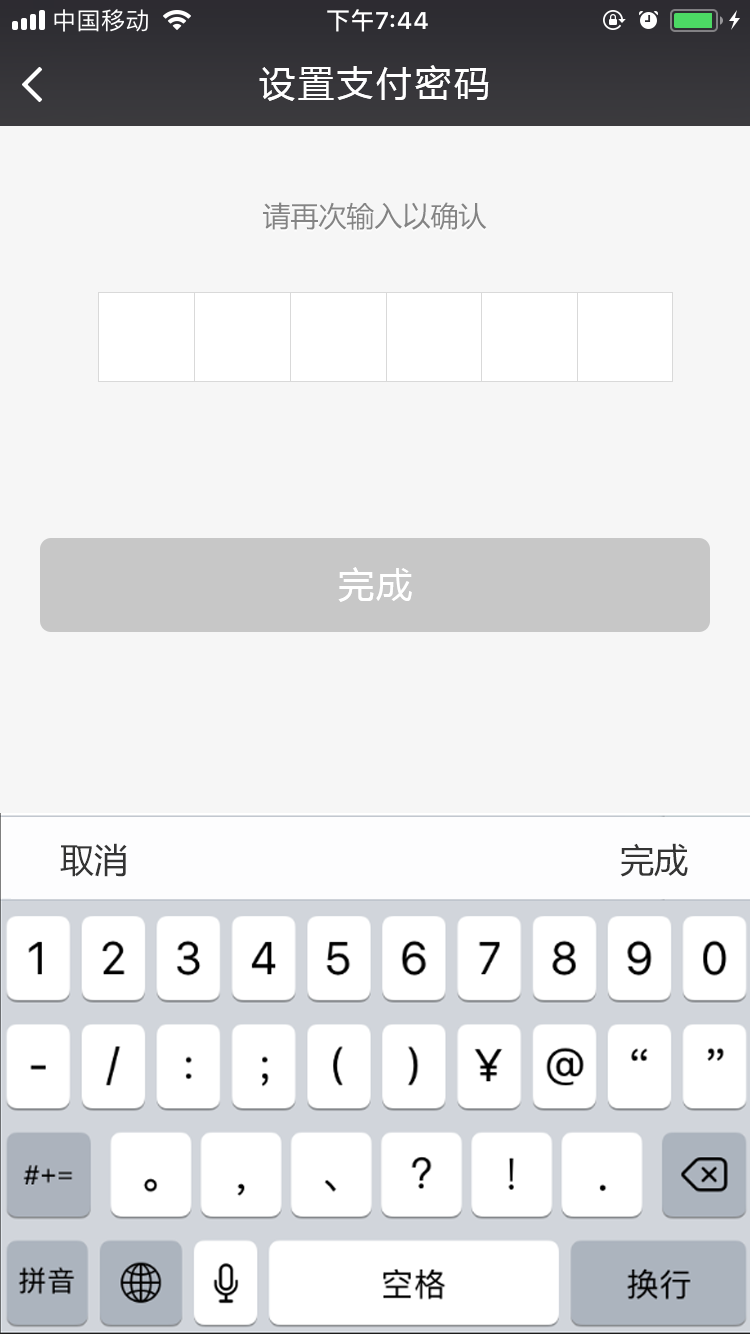
<style>
.page{position:relative;width:750px;height:1334px;background:#f6f6f6}
.page>*{position:absolute;margin:0}
.t1{font:36px "MicrosoftYaHei";letter-spacing:0.08em;color:#ffffff}
.t2{font:28px "MicrosoftYaHei";color:#747474}
.t3{font:34px "MicrosoftYaHei";color:#343434}
</style>
<div class="page">
<p class="t1" style="left:259px;top:65px;width:230px;height:36px">设置支付密码</p>
<p class="t2" style="left:263px;top:202px;width:224px;height:28px">请再次输入以确认</p>
<p class="t1" style="left:338px;top:567px;width:74px;height:35px">完成</p>
<p class="t3" style="left:60px;top:843px;width:67px;height:34px">取消</p>
<p class="t3" style="left:620px;top:843px;width:68px;height:34px">完成</p>
</div>
